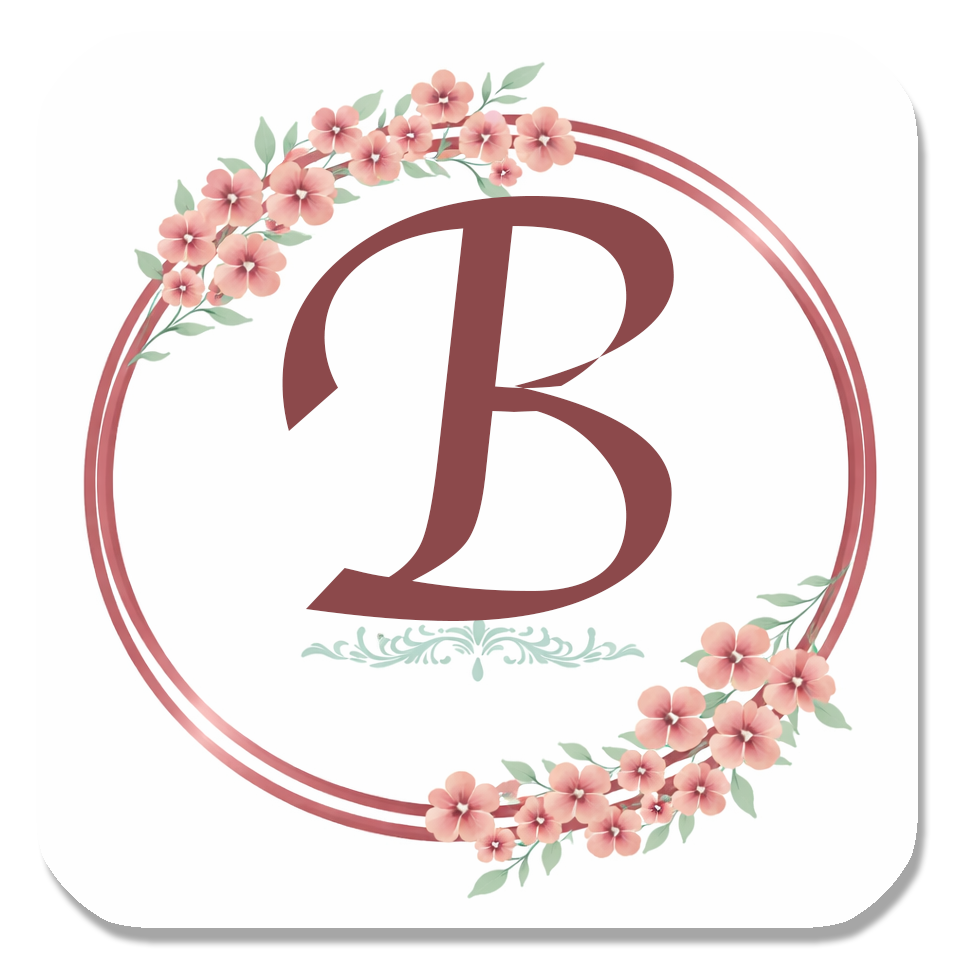
<style>
.page{position:relative;width:958px;height:959px;background:#fefefe}
.page>*{position:absolute;margin:0}
.t1{font:623px "Apple-Chancery";color:#8c494b}
</style>
<div class="page">
<p class="t1" style="left:282px;top:196px;width:392px;height:425px">B</p>
</div>
